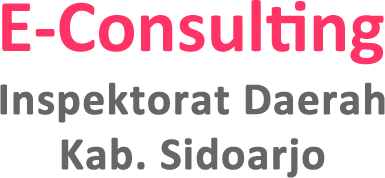
<style>
.page{position:relative;width:385px;height:178px;background:#ffffff}
.page>*{position:absolute;margin:0}
.t1{font:75px "Calibri-Bold";color:#ff3366}
.t2{font:45.8px "Calibri-Bold";color:#666666;font-weight:bold}
</style>
<div class="page">
<p class="t1" style="left:2px;top:0px;width:382px;height:65px">E-Consulting</p>
<p class="t2" style="left:0px;top:82px;width:385px;height:96px;text-align:center">Inspektorat Daerah<br>Kab. Sidoarjo</p>
</div>
